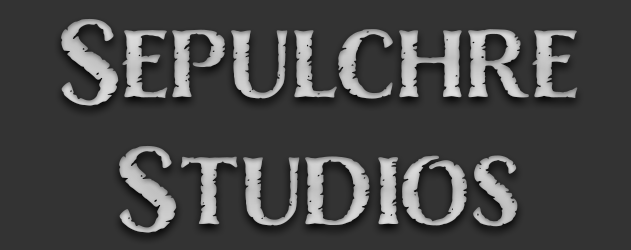
<style>
.page{position:relative;width:631px;height:250px;background:#333333}
.page>*{position:absolute;margin:0}
.t1{font:106px "Nelson-Bold";color:#c2c2c2}
</style>
<div class="page">
<p class="t1" style="left:61px;top:18px;width:517px;height:215px;text-align:center">Sepulchre<br>Studios</p>
</div>
